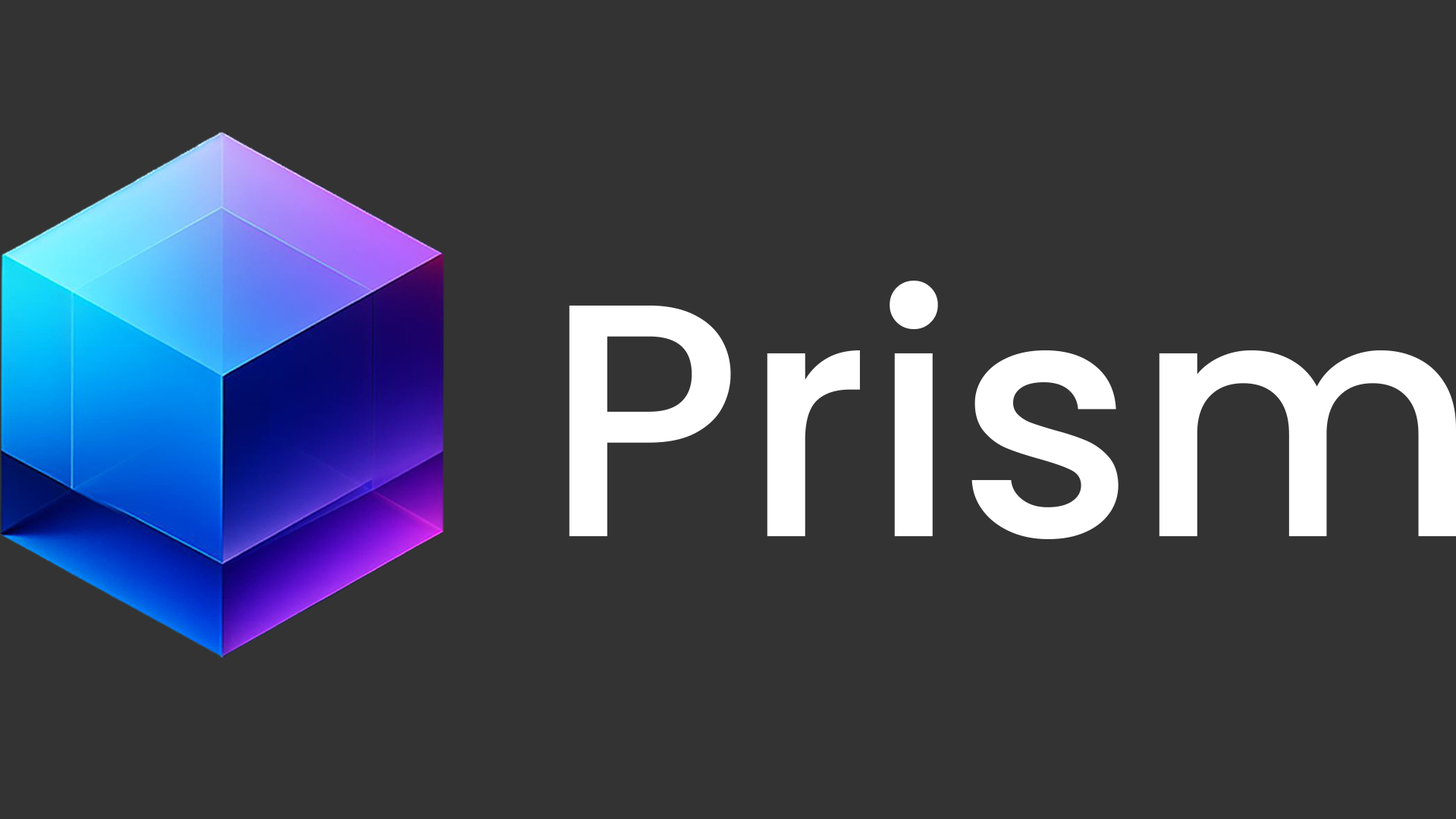
<style>
.page{position:relative;width:1456px;height:819px;background:#333333}
.page>*{position:absolute;margin:0}
.t1{font:331.8px "Poppins-Medium";color:#ffffff}
</style>
<div class="page">
<p class="t1" style="left:569px;top:281px;width:887px;height:258px">Prism</p>
</div>
